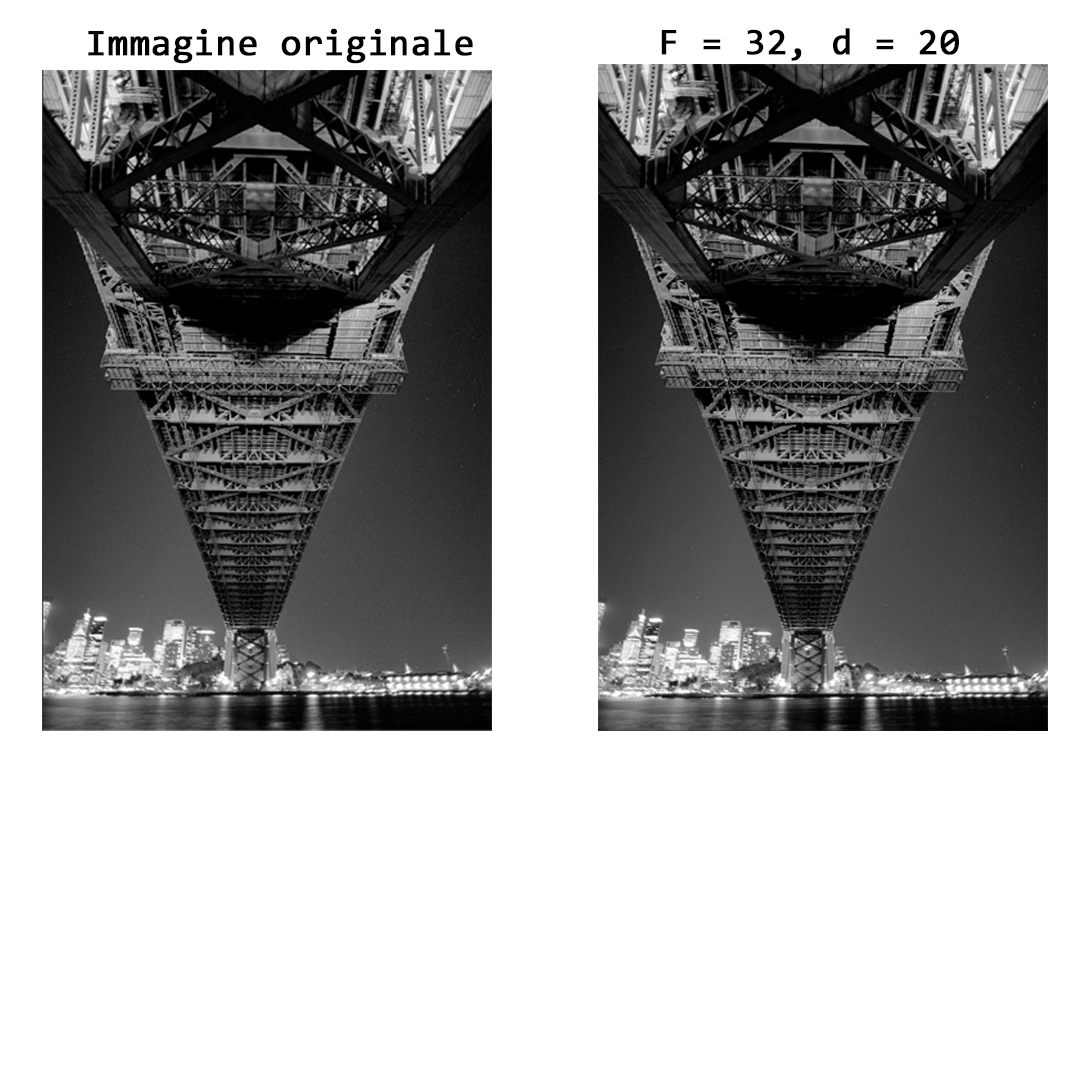
<style>
.page{position:relative;width:1080px;height:1080px;background:#ffffff}
.page>*{position:absolute;margin:0}
.t1{font:37.5px "Consolas";color:#000000;font-weight:bold}
</style>
<div class="page">
<p class="t1" style="left:88px;top:28px;width:385px;height:36px">Immagine originale</p>
<p class="t1" style="left:661px;top:28px;width:298px;height:33px">F = 32, d = 20</p>
</div>
